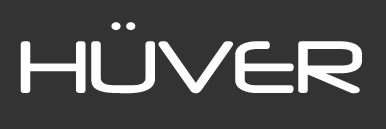
<style>
.page{position:relative;width:386px;height:129px;background:#333333}
.page>*{position:absolute;margin:0}
.t1{font:86.9px "Neuropol";color:#ffffff}
</style>
<div class="page">
<p class="t1" style="left:20px;top:22px;width:342px;height:72px">HÜVER</p>
</div>
